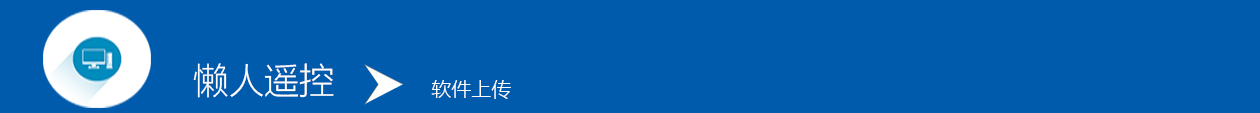
<style>
.page{position:relative;width:1260px;height:113px;background:#005bac}
.page>*{position:absolute;margin:0}
.t1{font:36px "MicrosoftYaHeiLight";color:#ffffff}
.t2{font:20px "MicrosoftYaHeiLight";color:#ffffff}
</style>
<div class="page">
<p class="t1" style="left:193px;top:63px;width:141px;height:35px">懒人遥控</p>
<p class="t2" style="left:431px;top:80px;width:80px;height:19px">软件上传</p>
</div>
